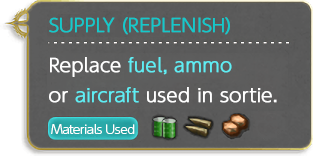
<style>
.page{position:relative;width:313px;height:156px}
.page>*{position:absolute;margin:0}
.t1{font:18px/40px "UDShinGoPro-Light";color:#14c9cb;font-weight:bold}
.t2{font:18px/40px "UDShinGoPro-Light";color:#ffffff;font-weight:bold}
.t3{font:18px/40px "UDShinGoPro-Light";color:#5eedf3;font-weight:bold}
.t4{font:18px/30px "UDShinGoPro-Light";color:#ffffff;font-weight:bold}
.t5{font:18px/30px "UDShinGoPro-Light";color:#5eedf3;font-weight:bold}
.t6{font:12px "UDShinGoPro-Light";letter-spacing:-0.04em;color:#ffffff}
</style>
<div class="page">
<p class="t1" style="left:49px;top:17px;width:228px;height:86px">SUPPLY (REPLENISH)<br><span class="t2">Replace </span><span class="t3">fuel, ammo<br></span><span class="t4">or </span><span class="t5">aircraft</span><span class="t4"> used in sortie.</span></p>
<p class="t6" style="left:51px;top:124px;width:84px;height:10px">Materials Used</p>
</div>
